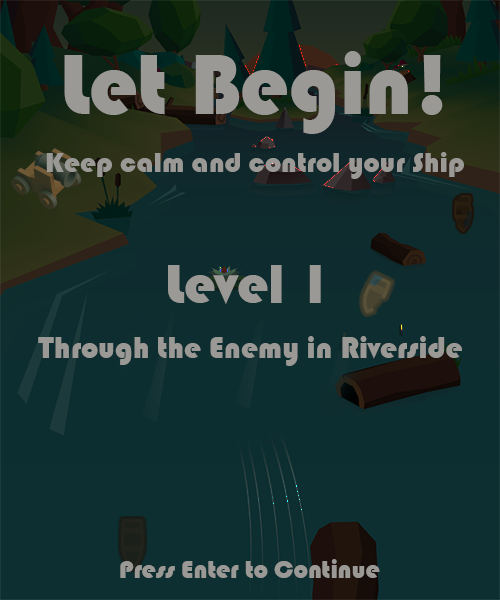
<style>
.page{position:relative;width:500px;height:600px}
.page>*{position:absolute;margin:0}
.t1{font:88.2px "Bauhaus93";color:#9a9995}
.t2{font:29.1px "Bauhaus93";color:#9a9995}
.t3{font:56.7px "Bauhaus93";color:#9a9995}
.t4{font:31.1px "Bauhaus93";color:#9a9995}
.t5{font:25.7px "Bauhaus93";color:#9a9995}
</style>
<div class="page">
<p class="t1" style="left:64px;top:51px;width:379px;height:83px">Let Begin!</p>
<p class="t2" style="left:46px;top:152px;width:418px;height:27px">Keep calm and control your Ship</p>
<p class="t3" style="left:168px;top:265px;width:153px;height:39px">Level 1</p>
<p class="t4" style="left:38px;top:336px;width:424px;height:30px">Through the Enemy in Riverside</p>
<p class="t5" style="left:120px;top:559px;width:260px;height:19px">Press Enter to Continue</p>
</div>
